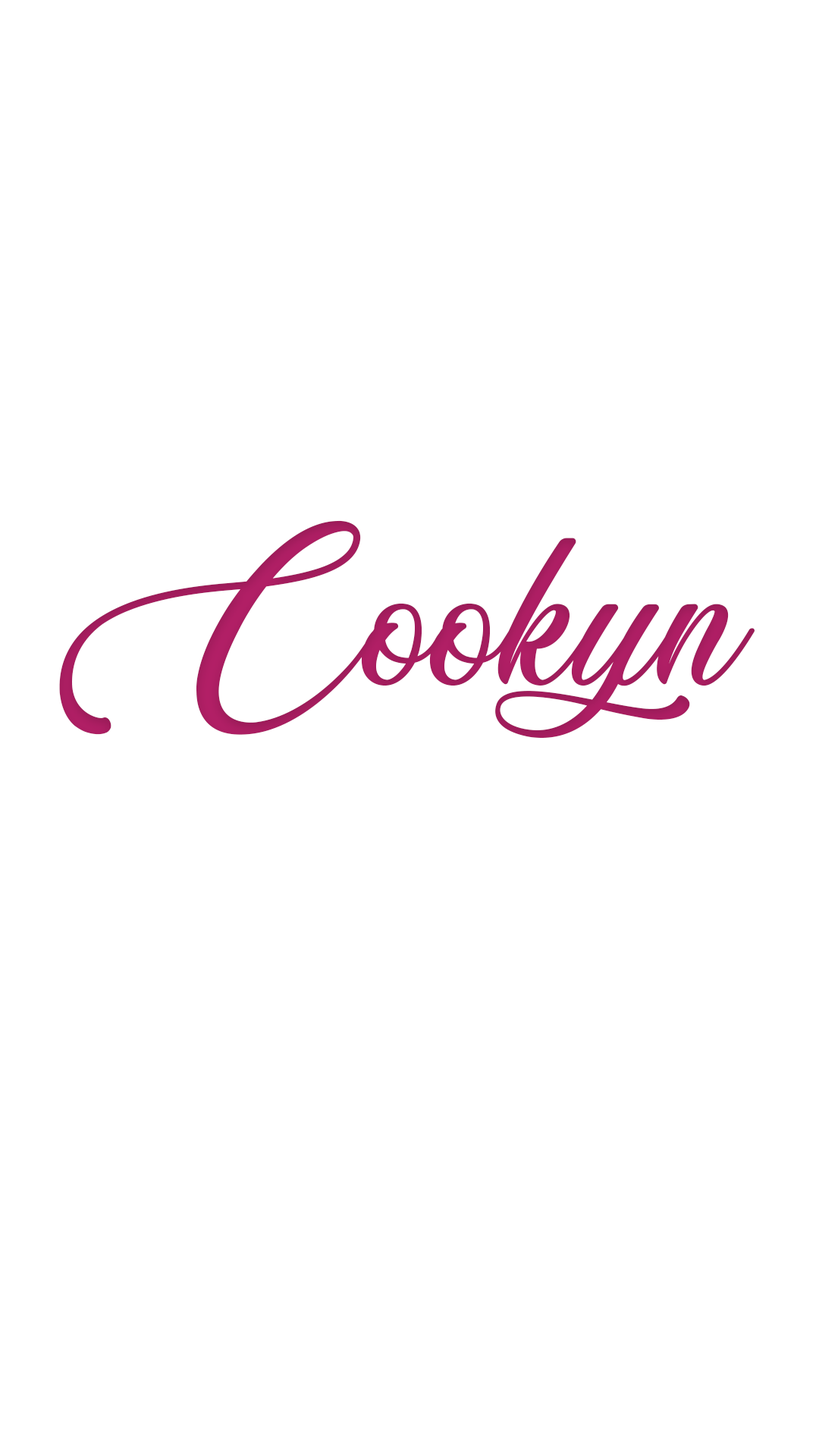
<style>
.page{position:relative;width:819px;height:1456px;background:#ffffff}
.page>*{position:absolute;margin:0}
.t1{font:208.5px "Weather-Sunday---Personal-Use";color:#b21f66}
</style>
<div class="page">
<p class="t1" style="left:59px;top:520px;width:696px;height:218px">Cookyn</p>
</div>
